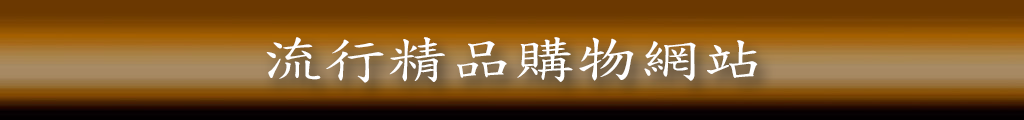
<style>
.page{position:relative;width:1024px;height:120px}
.page>*{position:absolute;margin:0}
.t1{font:52px "DFKaiShu-SB-Estd-BF";letter-spacing:0.01em;color:#ffffff;scale:1.2 1}
</style>
<div class="page">
<p class="t1" style="left:266px;top:37px;width:492px;height:46px">流行精品購物網站</p>
</div>
